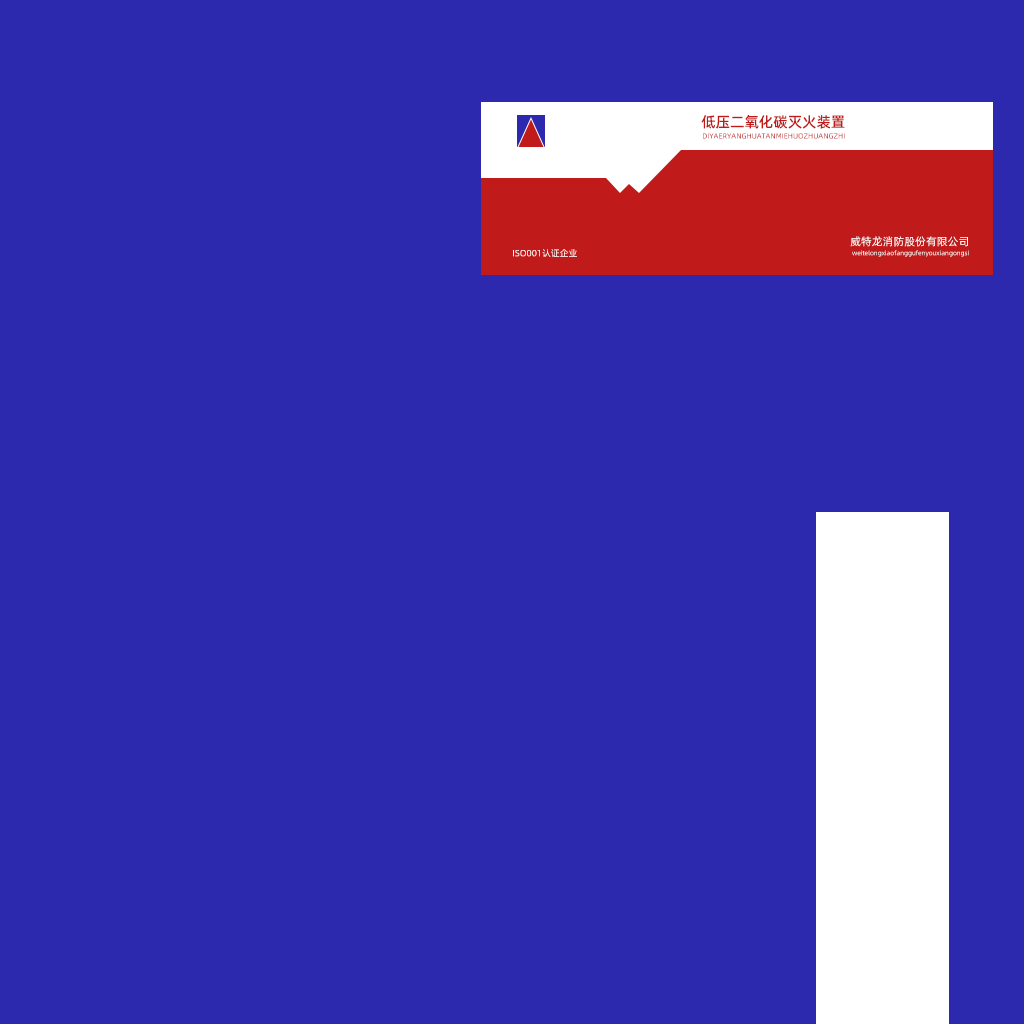
<style>
.page{position:relative;width:1024px;height:1024px;background:#2c29af}
.page>*{position:absolute;margin:0}
.t1{font:14.6px "AlibabaPuHuiTi-Medium";color:#c01a1a}
.t2{font:7.3px "AlibabaPuHuiTi-Regular"}
.t3{font:11px "AlibabaPuHuiTi-Regular";color:#ffffff}
.t4{font:9px "AlibabaPuHuiTi-Regular";color:#ffffff}
.t5{font:6.2px "AlibabaPuHuiTi-Regular"}
</style>
<div class="page">
<p class="t1" style="left:701px;top:114px;width:144px;height:15px">低压二氧化碳灭火装置</p>
<p class="t2" style="left:703px;top:133px;width:142px;height:6px">DIYAERYANGHUATANMIEHUOZHUANGZHI</p>
<p class="t3" style="left:850px;top:236px;width:118px;height:11px">威特龙消防股份有限公司</p>
<p class="t4" style="left:513px;top:249px;width:64px;height:8px">ISO001认证企业</p>
<p class="t5" style="left:852px;top:250px;width:117px;height:7px">weitelongxiaofanggufenyouxiangongsi</p>
</div>
